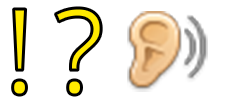
<style>
.page{position:relative;width:225px;height:104px;background:#ffffff}
.page>*{position:absolute;margin:0}
.t1{font:116.8px "OpenSans";text-transform:uppercase}
</style>
<div class="page">
<p class="t1" style="left:12px;top:9px;width:15px;height:86px">!</p>
<p class="t1" style="left:55px;top:8px;width:47px;height:87px">?</p>
</div>
